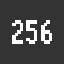
<style>
.page{position:relative;width:64px;height:64px;background:#333333}
.page>*{position:absolute;margin:0}
.t1{font:40.9px "Glasstown-NBP";letter-spacing:0.005em;color:#ffffff;font-weight:bold}
</style>
<div class="page">
<p class="t1" style="left:12px;top:20px;width:40px;height:24px">256</p>
</div>
